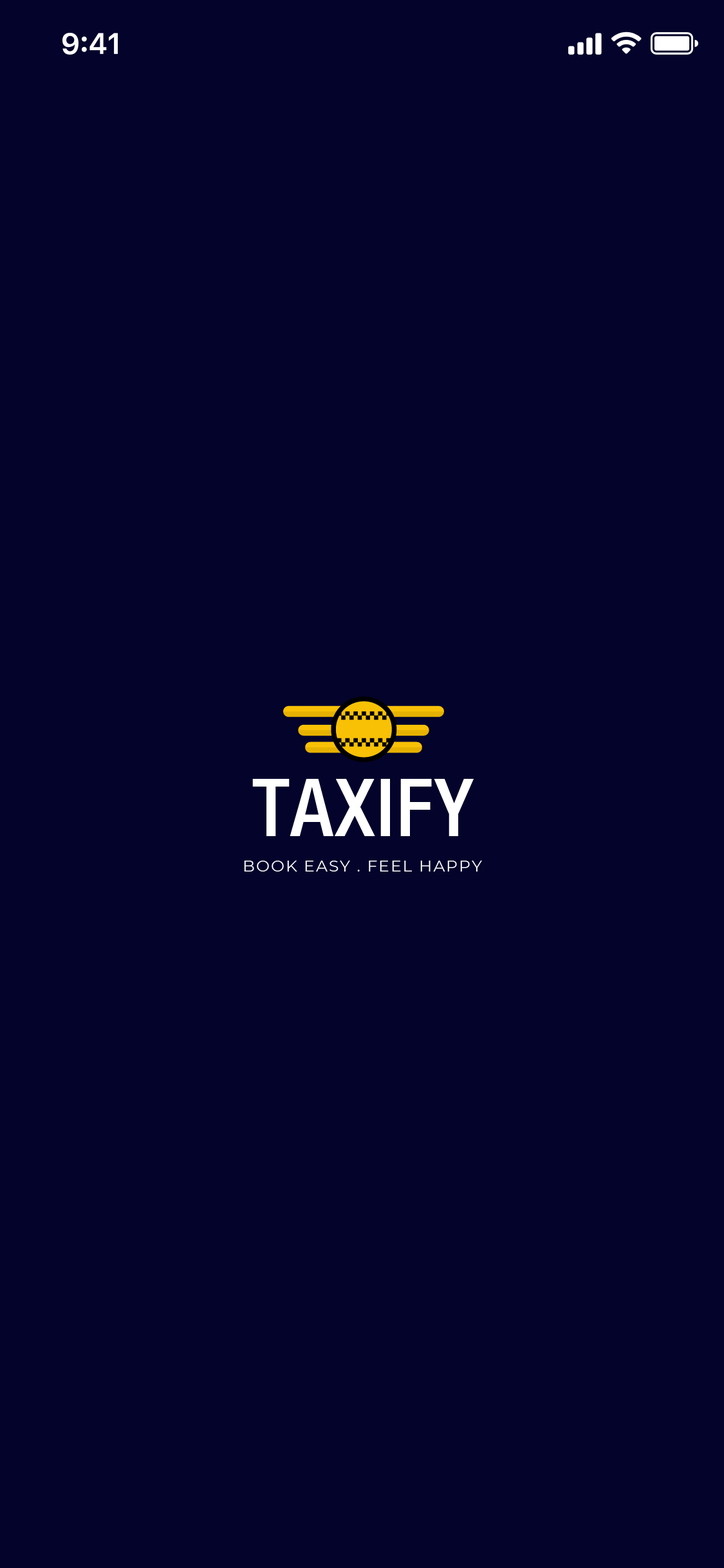
<style>
.page{position:relative;width:724px;height:1568px;background:#03032b}
.page>*{position:absolute;margin:0}
.t1{font:80.5px "HelveticaNeue-MediumCond";letter-spacing:0.02em;color:#ffffff;text-transform:uppercase}
.t2{font:16.1px "Montserrat-Regular";letter-spacing:0.08em;color:#ffffff;text-transform:uppercase}
</style>
<div class="page">
<p class="t1" style="left:252px;top:779px;width:222px;height:57px">Taxify</p>
<p class="t2" style="left:244px;top:861px;width:238px;height:11px">Book EASY . Feel happy</p>
</div>
